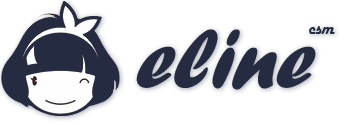
<style>
.page{position:relative;width:347px;height:125px;background:#ffffff}
.page>*{position:absolute;margin:0}
.t1{font:87px "ForteMT";letter-spacing:-0.01em;color:#252b41;font-style:italic}
.t2{font:18px "HarlowSolid";letter-spacing:-0.01em;color:#252b41}
</style>
<div class="page">
<p class="t1" style="left:136px;top:29px;width:180px;height:61px">eline</p>
<p class="t2" style="left:309px;top:26px;width:26px;height:8px">csm</p>
</div>
